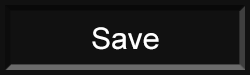
<style>
.page{position:relative;width:250px;height:75px;background:#111111}
.page>*{position:absolute;margin:0}
.t1{font:30px "ArialMT";color:#ffffff}
</style>
<div class="page">
<p class="t1" style="left:92px;top:27px;width:67px;height:23px">Save</p>
</div>
